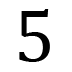
<style>
.page{position:relative;width:72px;height:72px;background:#ffffff}
.page>*{position:absolute;margin:0}
.t1{font:75px "CambriaMath";color:#000000}
</style>
<div class="page">
<p class="t1" style="left:19px;top:9px;width:31px;height:53px">5</p>
</div>
